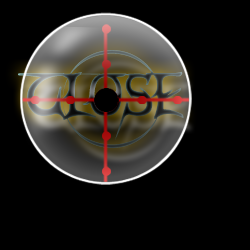
<style>
.page{position:relative;width:250px;height:250px;background:#000000}
.page>*{position:absolute;margin:0}
.t1{font:95px "CrEAtoRcAmpoTYPeSmcP";color:#000000}
</style>
<div class="page">
<p class="t1" style="left:18px;top:50px;width:166px;height:98px">Close</p>
</div>
